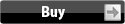
<style>
.page{position:relative;width:125px;height:24px;background:#4d4d4d}
.page>*{position:absolute;margin:0}
.t1{font:13.2px "KozGoPro-Heavy";color:#ffffff}
</style>
<div class="page">
<p class="t1" style="left:42px;top:6px;width:23px;height:14px">Buy</p>
</div>
